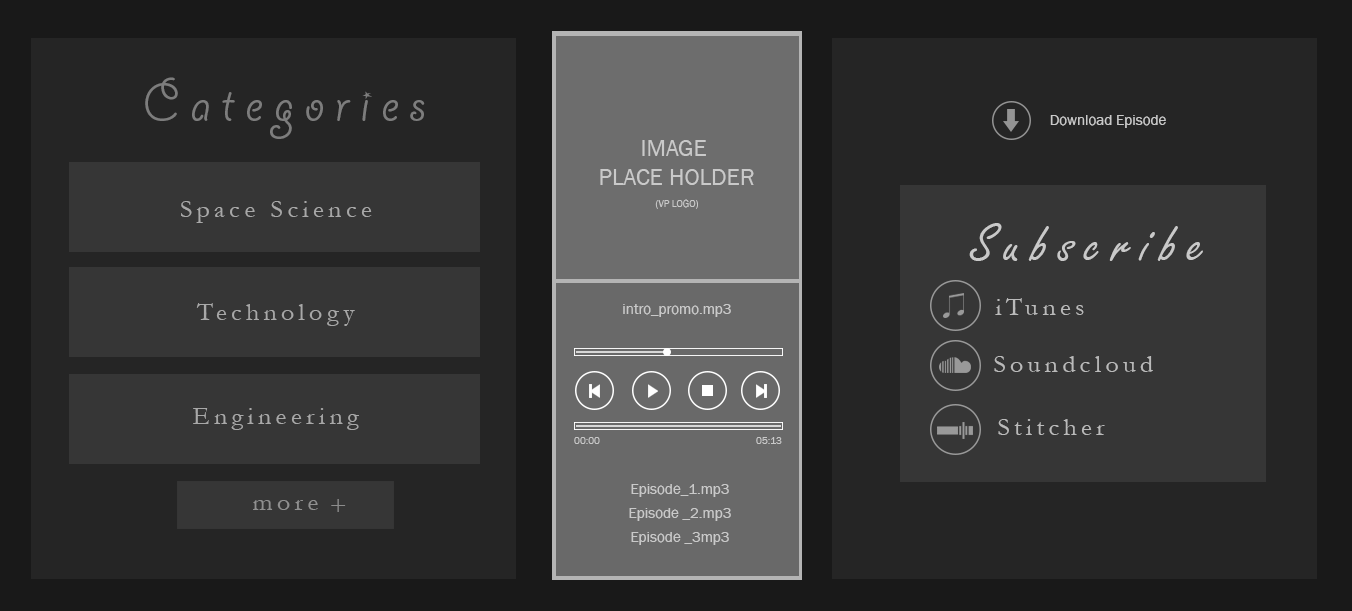
<style>
.page{position:relative;width:1352px;height:611px;background:#252525}
.page>*{position:absolute;margin:0}
.t1{font:58.4px "GiddyupStd";letter-spacing:0.18em;color:#7d7d7d;scale:1.03 1}
.t2{font:15px "FranklinGothic-Book";color:#c9c9c9}
.t3{font:24px "FranklinGothic-Book";color:#c9c9c9;text-transform:uppercase}
.t4{font:24.8px "Garamond";letter-spacing:0.18em;color:#a8a8a8;scale:1.03 1}
.t5{font:10px "FranklinGothic-Book";color:#c9c9c9;text-transform:uppercase}
.t6{font:58.4px "FreestyleScript-Regular";letter-spacing:0.18em;color:#c9c9c9;scale:1.03 1}
.t7{font:24.8px "Garamond";letter-spacing:0.18em;color:#bababa;scale:1.03 1}
.t8{font:24.8px "Garamond";letter-spacing:0.18em;color:#909090;scale:1.03 1}
.t9{font:24.8px "Garamond";letter-spacing:0.18em;color:#8c8c8c;scale:1.03 1}
</style>
<div class="page">
<p class="t1" style="left:145px;top:77px;width:280px;height:62px">Categories</p>
<p class="t2" style="left:1050px;top:115px;width:116px;height:13px">Download Episode</p>
<p class="t3" style="left:600px;top:140px;width:154px;height:45px;text-align:center">image <br>place holder</p>
<p class="t4" style="left:181px;top:201px;width:191px;height:22px">Space Science</p>
<p class="t5" style="left:655px;top:199px;width:43px;height:10px">(vp logo)</p>
<p class="t6" style="left:969px;top:223px;width:234px;height:38px">Subscribe</p>
<p class="t4" style="left:196px;top:303px;width:159px;height:23px">Technology</p>
<p class="t2" style="left:623px;top:304px;width:108px;height:13px">intro_promo.mp3</p>
<p class="t7" style="left:995px;top:298px;width:89px;height:17px">iTunes</p>
<p class="t7" style="left:994px;top:356px;width:159px;height:16px">Soundcloud</p>
<p class="t4" style="left:193px;top:408px;width:166px;height:22px">Engineering</p>
<p class="t7" style="left:998px;top:419px;width:107px;height:16px">Stitcher</p>
<p class="t5" style="left:574px;top:437px;width:26px;height:7px">00:00</p>
<p class="t5" style="left:756px;top:437px;width:26px;height:7px">05:13</p>
<p class="t2" style="left:631px;top:484px;width:98px;height:13px">Episode_1.mp3</p>
<p class="t8" style="left:253px;top:500px;width:65px;height:10px">more</p>
<p class="t9" style="left:331px;top:499px;width:15px;height:13px">+</p>
<p class="t2" style="left:629px;top:508px;width:102px;height:13px">Episode _2.mp3</p>
<p class="t2" style="left:631px;top:532px;width:98px;height:13px">Episode _3mp3</p>
</div>
